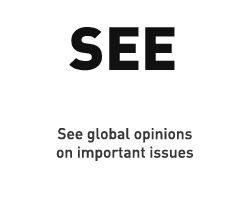
<style>
.page{position:relative;width:250px;height:200px;background:#ffffff}
.page>*{position:absolute;margin:0}
.t1{font:60px "DIN-Black";color:#111111}
.t2{font:15.5px "DIN-Medium";color:#363636}
</style>
<div class="page">
<p class="t1" style="left:69px;top:27px;width:106px;height:44px">SEE</p>
<p class="t2" style="left:56px;top:128px;width:138px;height:33px;text-align:center">See global opinions<br>on important issues</p>
</div>
